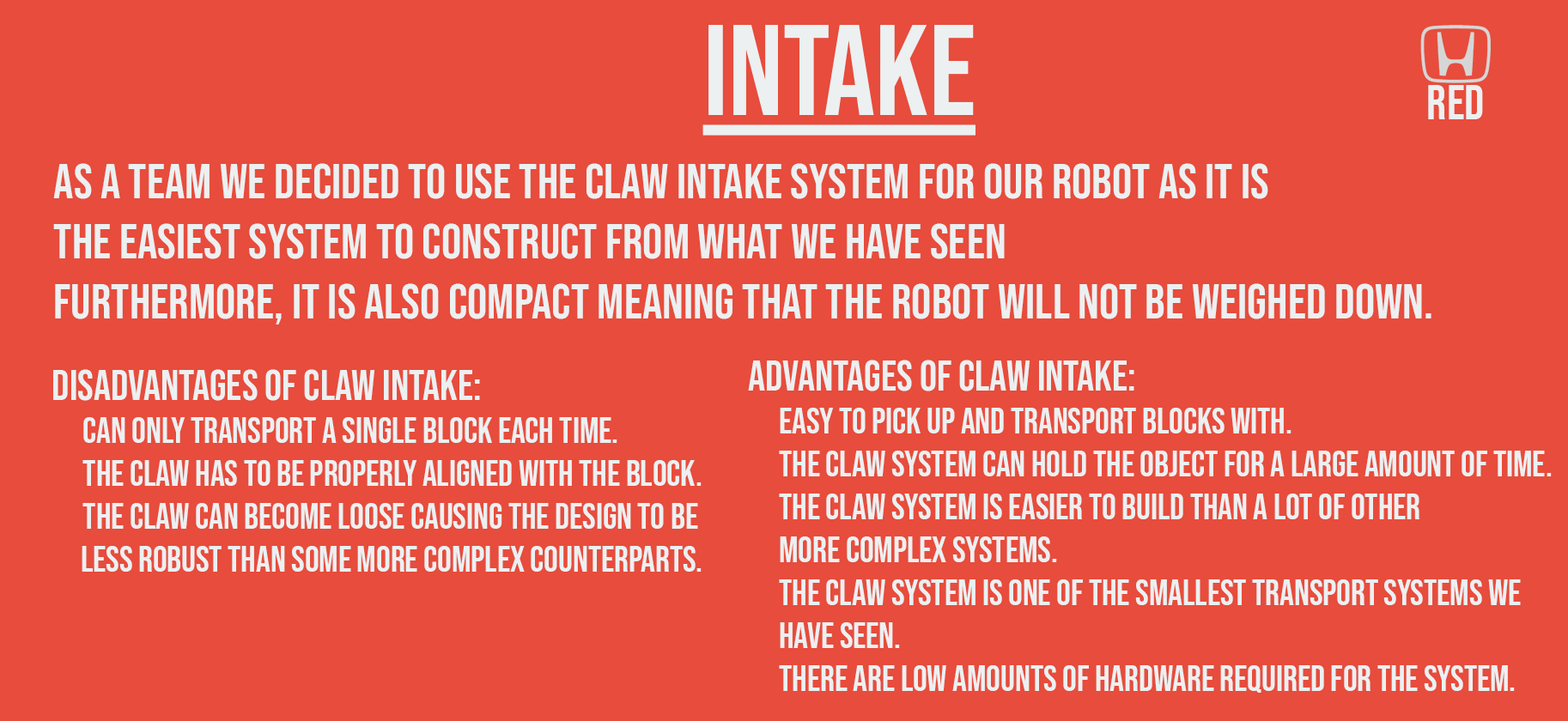
<style>
.page{position:relative;width:1568px;height:721px;background:#e74c3c}
.page>*{position:absolute;margin:0}
.t1{font:128.8px "BebasNeue-Regular";color:#ecf0f1;text-decoration:underline}
.t2{font:49.3px "BebasNeue-Regular";color:#ecf0f1}
.t3{font:50.1px "BebasNeue-Regular";color:#ecf0f1}
.t4{font:35.8px "BebasNeue-Regular";color:#ecf0f1}
.t5{font:42.9px "BebasNeue-Regular";color:#ecf0f1}
.t6{font:10.3px "BebasNeue-Regular";color:#ecf0f1}
</style>
<div class="page">
<p class="t1" style="left:702px;top:25px;width:273px;height:111px">intake</p>
<p class="t2" style="left:1428px;top:85px;width:55px;height:34px">RED</p>
<p class="t3" style="left:53px;top:163px;width:1378px;height:162px">AS A TEAM WE DECIDED to use the claw intake SYSTEM FOR OUR ROBOT AS IT IS<br>the easiest SYSTEM TO CONSTRUCT FROM WHAT WE HAVE SEEN<br>FURTHERMORE, IT IS ALSO COMPACT MEANING THAT THE ROBOT WILL NOT BE WEIGHED DOWN.</p>
<p class="t4" style="left:748px;top:360px;width:804px;height:333px"><span class="t5">Advantages of claw intake:<br></span> Easy to pick up and transport blocks with.<br> the claw system can hold the object for a large amount of time.<br> the claw system is easier to build than a lot of other <br> more complex systems.<br> The claw system is one of the smallest transport systems we <br> have seen.<br> there are low amounts of hardware required for the system.</p>
<p class="t4" style="left:53px;top:369px;width:649px;height:203px"><span class="t6">DISADVANTAGES OF CLAW INTAKE:<br></span> CAN ONLY TRANSPORT A SINGLE BLOCK EACH TIME.<br> THE CLAW HAS TO BE PROPERLY ALIGNED WITH THE BLOCK.<br> THE CLAW CAN BECOME LOOSE CAUSING THE DESIGN TO BE <br>     LESS ROBUST THAN SOME MORE COMPLEX COUNTERPARTS.</p>
</div>
